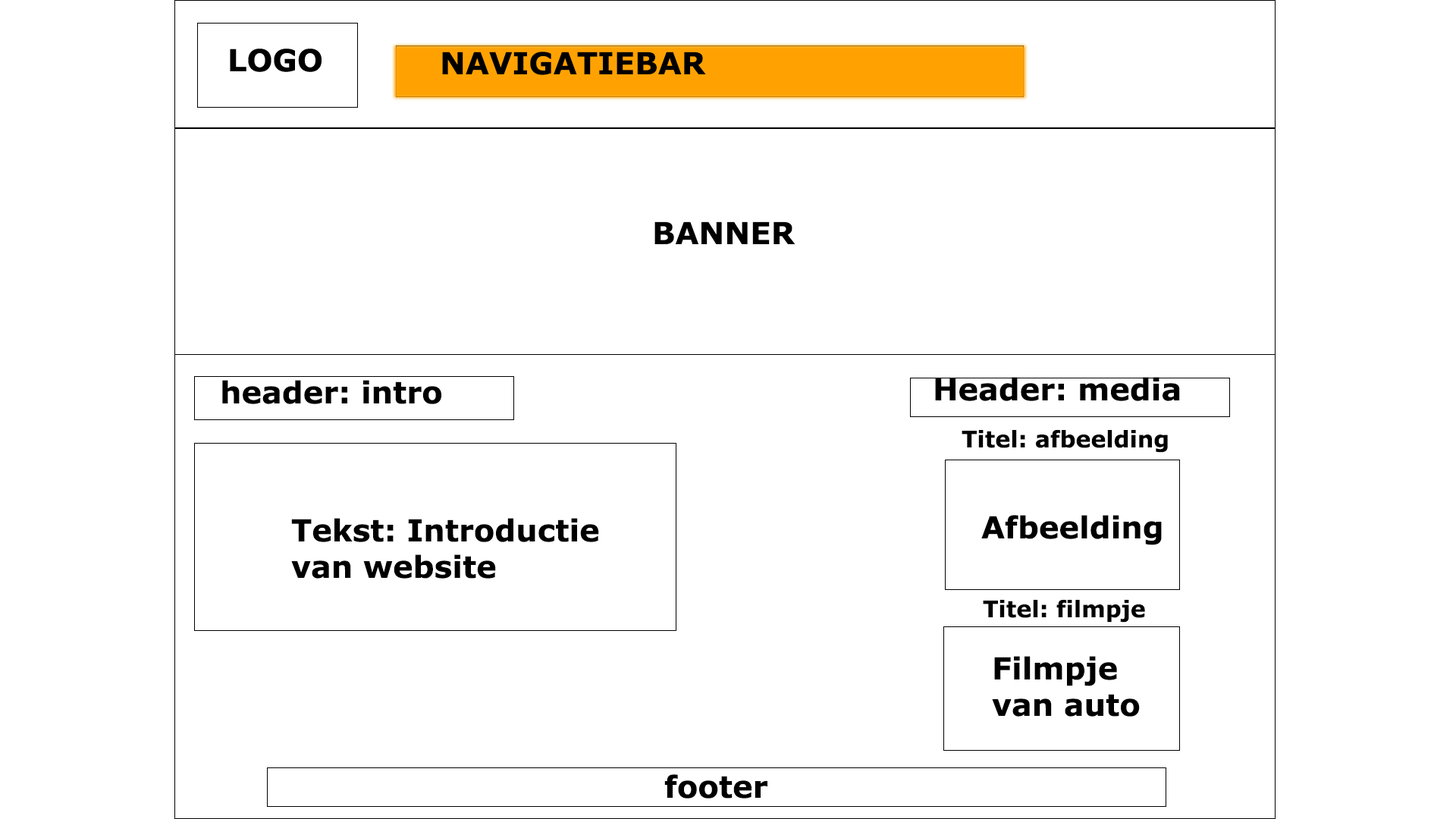
<style>
.page{position:relative;width:1456px;height:819px;background:#ffffff}
.page>*{position:absolute;margin:0}
.t1{font:30.3px "Verdana-Bold";color:#000000}
.t2{font:22.7px "Verdana-Bold";color:#000000}
</style>
<div class="page">
<p class="t1" style="left:442px;top:52px;width:264px;height:23px">NAVIGATIEBAR</p>
<p class="t1" style="left:654px;top:221px;width:141px;height:23px">BANNER</p>
<p class="t1" style="left:935px;top:377px;width:245px;height:24px">Header: media</p>
<p class="t1" style="left:222px;top:380px;width:219px;height:24px">header: intro</p>
<p class="t2" style="left:962px;top:430px;width:206px;height:23px">Titel: afbeelding</p>
<p class="t1" style="left:291px;top:518px;width:308px;height:61px">Tekst: Introductie<br>van website</p>
<p class="t1" style="left:981px;top:515px;width:181px;height:30px">Afbeelding</p>
<p class="t2" style="left:983px;top:600px;width:162px;height:23px">Titel: filmpje</p>
<p class="t1" style="left:992px;top:656px;width:148px;height:61px">Filmpje<br>van auto</p>
<p class="t1" style="left:664px;top:774px;width:103px;height:25px">footer</p>
</div>
